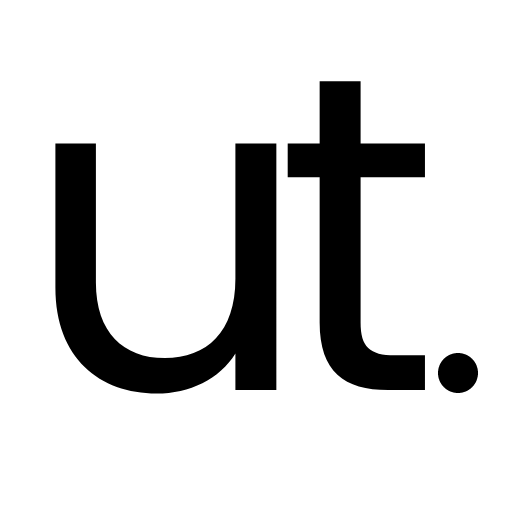
<style>
.page{position:relative;width:512px;height:512px;background:#ffffff}
.page>*{position:absolute;margin:0}
.t1{font:450px "Poppins-Regular";color:#000000}
</style>
<div class="page">
<p class="t1" style="left:287px;top:81px;width:138px;height:309px">t</p>
<p class="t1" style="left:55px;top:143px;width:222px;height:251px">u</p>
</div>
